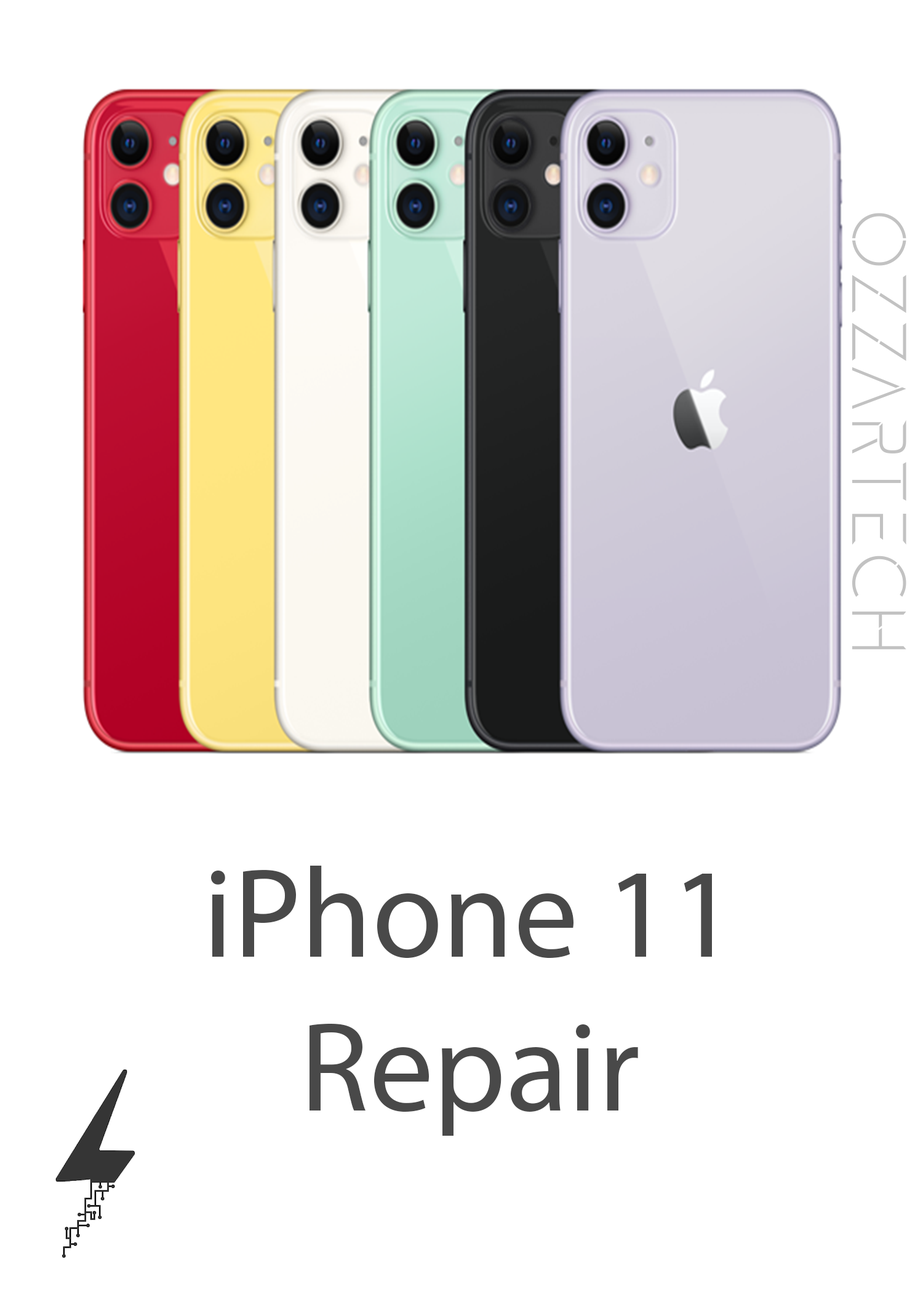
<style>
.page{position:relative;width:923px;height:1292px;background:#ffffff}
.page>*{position:absolute;margin:0}
.t1{font:76.9px "Gluon-Light";color:#c2c2c2}
.t2{font:128.2px "MyriadPro-Regular";color:#494949}
</style>
<div class="page">
<p class="t1" style="left:852px;top:213px;width:54px;height:437px;rotate:90deg">OzzarTech</p>
<p class="t2" style="left:211px;top:866px;width:501px;height:270px;text-align:center">iPhone 11<br>Repair</p>
</div>
